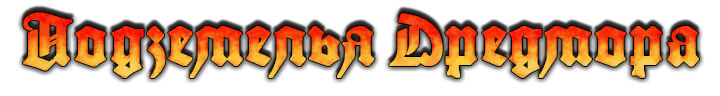
<style>
.page{position:relative;width:720px;height:96px;background:#ffffff}
.page>*{position:absolute;margin:0}
.t1{font:71.8px "ALOTGutenbergB-Normal";letter-spacing:0.03em;font-weight:bold}
</style>
<div class="page">
<p class="t1" style="left:23px;top:12px;width:676px;height:66px">Подземелья Дредмора</p>
</div>
